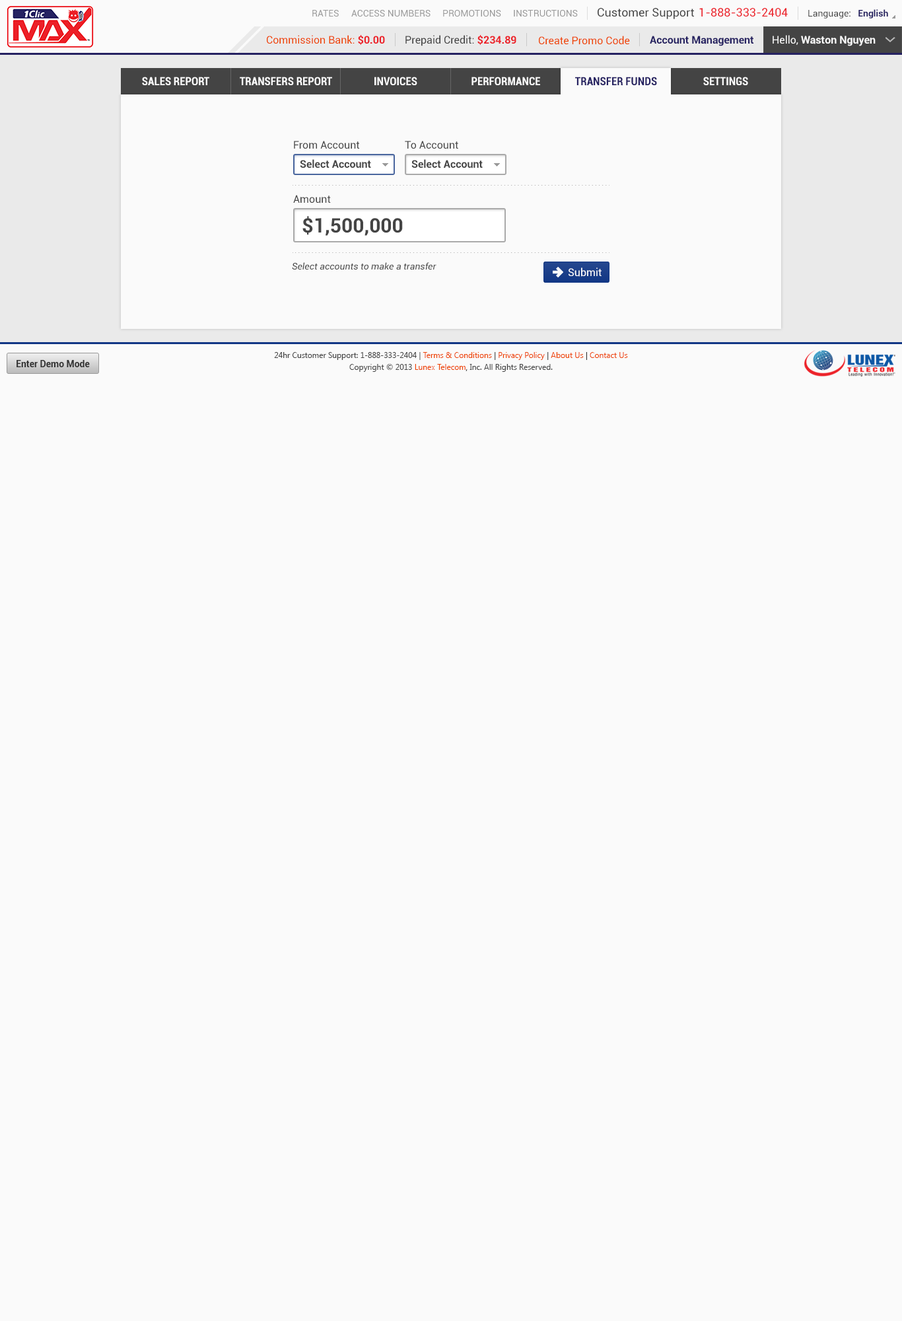
<style>
.page{position:relative;width:902px;height:1321px;background:#fafafa}
.page>*{position:absolute;margin:0}
.t1{font:9.2px "Roboto-Regular";color:#999999}
.t2{font:11.6px "Roboto-Regular";color:#444444}
.t3{font:11.6px "Roboto-Regular";color:#ec2029}
.t4{font:9.2px "Roboto-Regular";color:#444444}
.t5{font:9.2px "Roboto-Bold";color:#262262}
.t6{font:10.6px "Roboto-Regular";color:#ee4400}
.t7{font:10.6px "Roboto-Bold";color:#ec2028}
.t8{font:10.6px "Roboto-Regular";color:#444444}
.t9{font:10.6px "Roboto-Bold";color:#262262}
.t10{font:10.6px "Roboto-Bold";color:#fafafa}
.t11{font:10.6px "Roboto-Regular";color:#fafafa}
.t12{font:11.2px "Roboto-BoldCondensed";color:#fafafa}
.t13{font:11.2px "Roboto-BoldCondensed";color:#262262}
.t14{font:10.6px "Roboto-Bold";color:#444444}
.t15{font:19.8px "Roboto-Bold";color:#444444}
.t16{font:9.2px "Roboto-Italic";color:#444444}
.t17{font:10.6px "Roboto-Regular";color:#ffffff}
.t18{font:7.9px/11.9px "SegoeUI";color:#444444}
.t19{font:7.9px/11.9px "SegoeUI";color:#ee4400}
.t20{font:7.9px/11.9px "SegoeUI";color:#333333}
.t21{font:9.2px "Roboto-Bold";color:#333333}
</style>
<div class="page">
<p class="t1" style="left:312px;top:10px;width:27px;height:7px">RATES</p>
<p class="t1" style="left:351px;top:10px;width:80px;height:7px">ACCESS NUMBERS</p>
<p class="t1" style="left:443px;top:10px;width:58px;height:7px">PROMOTIONS</p>
<p class="t1" style="left:514px;top:10px;width:64px;height:7px">INSTRUCTIONS</p>
<p class="t2" style="left:598px;top:8px;width:96px;height:11px">Customer Support</p>
<p class="t3" style="left:700px;top:8px;width:88px;height:9px">1-888-333-2404</p>
<p class="t4" style="left:809px;top:9px;width:80px;height:9px">Language:   <span class="t5">English</span></p>
<p class="t6" style="left:267px;top:35px;width:118px;height:10px">Commission Bank: <span class="t7">$0.00</span></p>
<p class="t8" style="left:406px;top:35px;width:111px;height:11px">Prepaid Credit: <span class="t7">$234.89</span></p>
<p class="t6" style="left:539px;top:36px;width:91px;height:9px">Create Promo Code</p>
<p class="t9" style="left:650px;top:36px;width:104px;height:10px">Account Management</p>
<p class="t10" style="left:773px;top:35px;width:103px;height:11px"><span class="t11">Hello, </span>Waston Nguyen</p>
<p class="t12" style="left:142px;top:77px;width:67px;height:8px">SALES REPORT</p>
<p class="t12" style="left:240px;top:77px;width:92px;height:8px">TRANSFERS REPORT</p>
<p class="t12" style="left:375px;top:77px;width:43px;height:8px">INVOICES</p>
<p class="t12" style="left:472px;top:77px;width:68px;height:8px">PERFORMANCE</p>
<p class="t13" style="left:575px;top:77px;width:82px;height:8px">TRANSFER FUNDS</p>
<p class="t12" style="left:704px;top:77px;width:45px;height:8px">SETTINGS</p>
<p class="t8" style="left:294px;top:141px;width:66px;height:8px">From Account</p>
<p class="t8" style="left:405px;top:141px;width:53px;height:8px">To Account</p>
<p class="t14" style="left:300px;top:159px;width:71px;height:9px">Select Account</p>
<p class="t14" style="left:412px;top:159px;width:71px;height:9px">Select Account</p>
<p class="t8" style="left:293px;top:195px;width:38px;height:8px">Amount</p>
<p class="t15" style="left:303px;top:216px;width:100px;height:20px">$1,500,000</p>
<p class="t16" style="left:292px;top:262px;width:145px;height:8px">Select accounts to make a transfer</p>
<p class="t17" style="left:569px;top:268px;width:33px;height:9px">Submit</p>
<p class="t18" style="left:274px;top:352px;width:354px;height:20px;text-align:center">24hr Customer Support: 1-888-333-2404 | <span class="t19">Terms &amp; Conditions</span><span class="t20"> | </span><span class="t19">Privacy Policy</span><span class="t20"> | </span><span class="t19">About Us</span><span class="t20"> | </span><span class="t19">Contact Us<br></span>Copyright © 2013 <span class="t19">Lunex Telecom</span><span class="t20">,</span> Inc. All Rights Reserved.</p>
<p class="t21" style="left:17px;top:360px;width:73px;height:7px">Enter Demo Mode</p>
</div>
